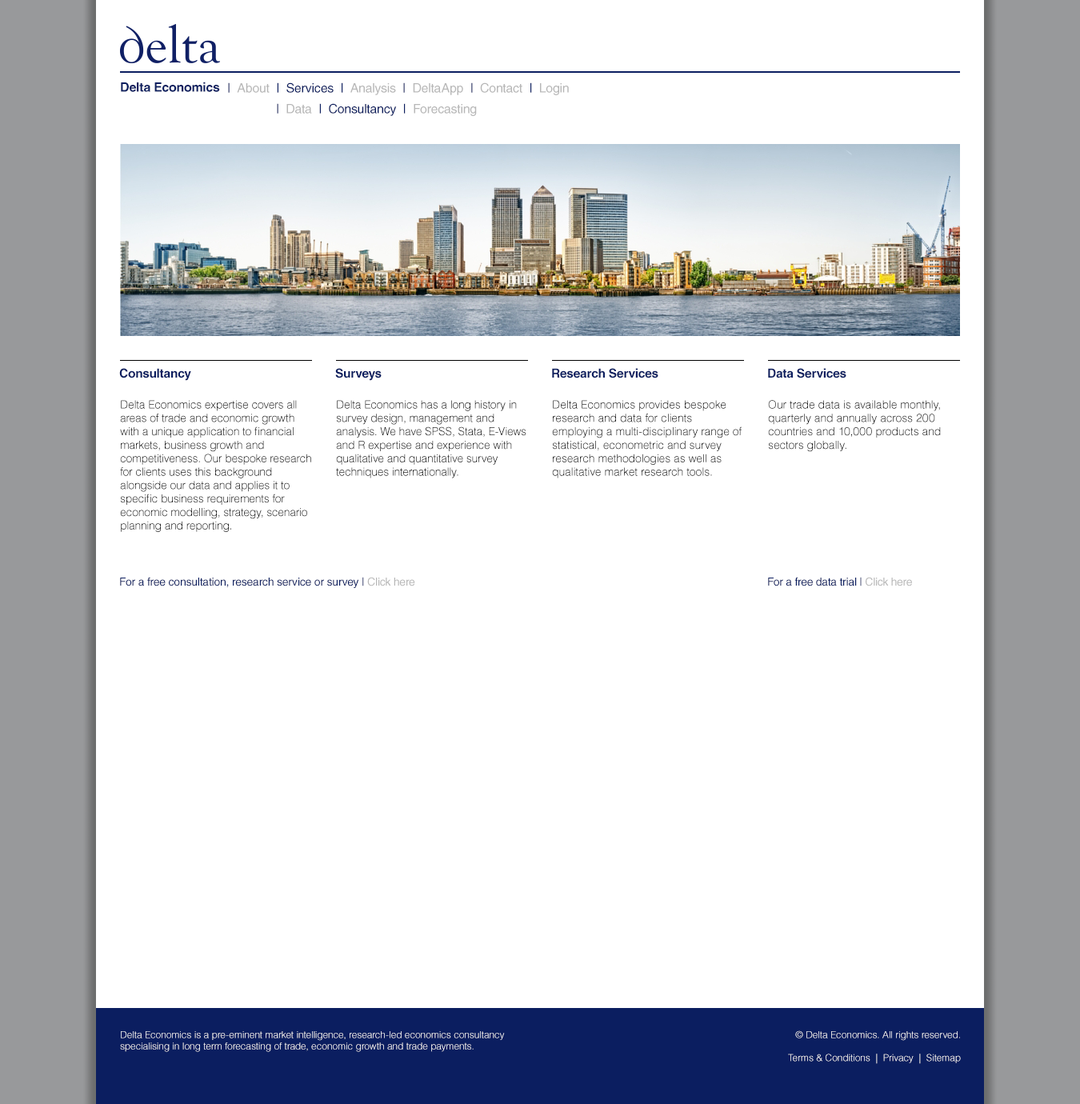
<style>
.page{position:relative;width:1080px;height:1104px;background:#ffffff}
.page>*{position:absolute;margin:0}
.t1{font:12.8px "HelveticaLTStd-Bold";letter-spacing:-0.015em;color:#0b1e60}
.t2{font:12.8px "HelveticaLTStd-Roman";letter-spacing:-0.015em;color:#0b1e60}
.t3{font:12.8px "HelveticaLTStd-Roman";letter-spacing:-0.015em;color:#b7b7b7}
.t4{font:12.4px "HelveticaLTStd-Bold";letter-spacing:-0.015em;color:#0b1e60}
.t5{font:11.2px "HelveticaLTStd-Light";letter-spacing:-0.01em;color:#000000}
.t6{font:11.2px "HelveticaLTStd-Light";color:#000000}
.t7{font:11.2px "HelveticaLTStd-Roman";letter-spacing:-0.015em;color:#0b1e60}
.t8{font:11.2px "HelveticaLTStd-Roman";letter-spacing:-0.015em;color:#b7b7b7}
.t9{font:11.2px "HelveticaLTStd-Roman";letter-spacing:-0.02em;color:#0b1e60}
.t10{font:11.2px "HelveticaLTStd-Roman";letter-spacing:-0.02em;color:#b7b7b7}
.t11{font:9.6px "HelveticaLTStd-Light";color:#ffffff}
</style>
<div class="page">
<p class="t1" style="left:121px;top:82px;width:99px;height:10px">Delta Economics</p>
<p class="t2" style="left:228px;top:82px;width:341px;height:13px">|  <span class="t3">About  </span>|  Services  |  <span class="t3">Analysis  </span>|  <span class="t3">DeltaApp  </span>|  <span class="t3">Contact  </span>|  <span class="t3">Login</span></p>
<p class="t2" style="left:277px;top:103px;width:200px;height:13px">|  <span class="t3">Data  </span>|  Consultancy  |<span class="t3">  Forecasting</span></p>
<p class="t4" style="left:119px;top:368px;width:72px;height:13px">Consultancy</p>
<p class="t4" style="left:335px;top:368px;width:47px;height:13px">Surveys</p>
<p class="t4" style="left:552px;top:368px;width:106px;height:10px">Research Services</p>
<p class="t4" style="left:768px;top:368px;width:78px;height:10px">Data Services</p>
<p class="t5" style="left:120px;top:400px;width:191px;height:132px">Delta Economics expertise covers all areas of trade and economic growth with a unique application to financial markets, business growth and competitiveness. Our bespoke research for clients uses this background alongside our data and applies it to specific business requirements for economic modelling, strategy, scenario planning and reporting.</p>
<p class="t5" style="left:336px;top:400px;width:190px;height:78px">Delta Economics has a long history in survey design, management and analysis. We have SPSS, Stata, E-Views and R expertise and experience with qualitative and quantitative survey techniques internationally.</p>
<p class="t6" style="left:552px;top:400px;width:190px;height:78px">Delta Economics provides bespoke research and data for clients employing a multi-disciplinary range of statistical, econometric and survey research methodologies as well as qualitative market research tools.</p>
<p class="t6" style="left:768px;top:400px;width:173px;height:52px">Our trade data is available monthly, quarterly and annually across 200 countries and 10,000 products and sectors globally.</p>
<p class="t7" style="left:120px;top:577px;width:295px;height:11px">For a free consultation, research service or survey | <span class="t8">Click here</span></p>
<p class="t9" style="left:768px;top:577px;width:144px;height:9px">For a free data trial | <span class="t10">Click here</span></p>
<p class="t11" style="left:120px;top:1031px;width:385px;height:21px">Delta Economics is a pre-eminent market intelligence, research-led economics consultancy<br>specialising in long term forecasting of trade, economic growth and trade payments.</p>
<p class="t11" style="left:788px;top:1030px;width:173px;height:34px;text-align:right">© Delta Economics. All rights reserved.<br><br>Terms &amp; Conditions  |  Privacy  |  Sitemap</p>
</div>
